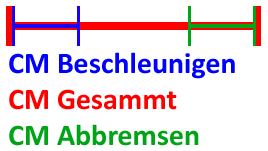
<style>
.page{position:relative;width:268px;height:151px;background:#ffffff}
.page>*{position:absolute;margin:0}
.t1{font:30px "Calibri-Bold";color:#0000ff}
.t2{font:30px "Calibri-Bold";color:#ff0000}
.t3{font:30px "Calibri-Bold";color:#00a417}
</style>
<div class="page">
<p class="t1" style="left:9px;top:52px;width:226px;height:94px">CM Beschleunigen<br><span class="t2">CM Gesammt<br></span><span class="t3">CM Abbremsen</span></p>
</div>
